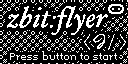
<style>
.page{position:relative;width:128px;height:64px;background:#000000}
.page>*{position:absolute;margin:0}
.t1{font:29.1px "HoeflerText-Italic";color:#ffffff}
.t2{font:8px "Memoria";color:#ffffff}
</style>
<div class="page">
<p class="t1" style="left:6px;top:5px;width:102px;height:31px">zbit:flyer</p>
<p class="t2" style="left:10px;top:51px;width:107px;height:9px">Press button to start</p>
</div>
